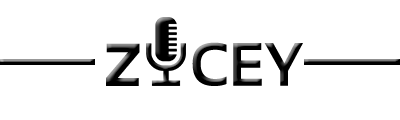
<style>
.page{position:relative;width:400px;height:120px;background:#ffffff}
.page>*{position:absolute;margin:0}
.t1{font:82.2px "Sansation-Bold"}
.t2{font:60.9px "Sansation-Bold";color:#000000;scale:0.95 1}
</style>
<div class="page">
<p class="t1" style="left:106px;top:43px;width:34px;height:43px">z</p>
<p class="t2" style="left:192px;top:42px;width:111px;height:44px">CEY</p>
</div>
